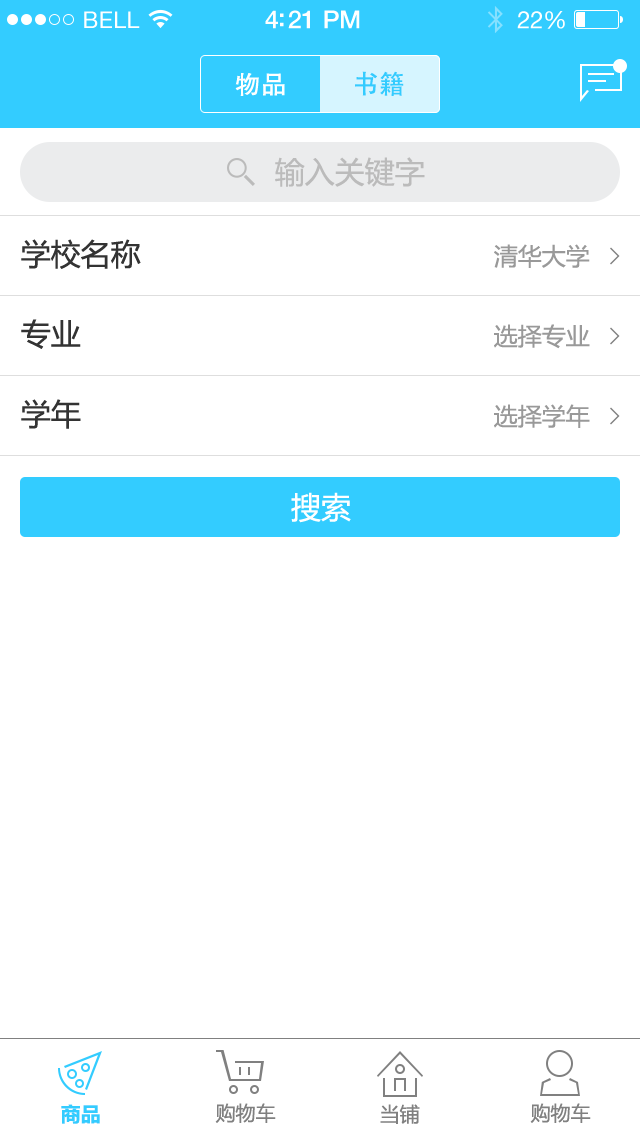
<style>
.page{position:relative;width:640px;height:1136px;background:#ffffff}
.page>*{position:absolute;margin:0}
.t1{font:23px "HelveticaNeue";letter-spacing:0.02em;color:#ffffff}
.t2{font:25px "HelveticaNeue-Medium";letter-spacing:-0.02em;color:#ffffff}
.t3{font:24px "HelveticaNeue";letter-spacing:-0.02em;color:#ffffff}
.t4{font:26px "FZHTJW--GB1-0";color:#ffffff}
.t5{font:26px "AdobeHeitiStd-Regular";color:#33ccff}
.t6{font:30px "MicrosoftYaHei";color:#bbbbbb}
.t7{font:30px "MicrosoftYaHei";color:#333333}
.t8{font:24px "MicrosoftYaHei";color:#999999}
.t9{font:30px "MicrosoftYaHei";color:#ffffff}
.t10{font:20px "MicrosoftYaHei";color:#33ccff}
.t11{font:20px "MicrosoftYaHei";color:#808080}
</style>
<div class="page">
<p class="t1" style="left:84px;top:11px;width:56px;height:17px">BELL</p>
<p class="t2" style="left:265px;top:10px;width:95px;height:19px">4:21 PM</p>
<p class="t3" style="left:517px;top:11px;width:48px;height:18px">22%</p>
<p class="t4" style="left:235px;top:73px;width:50px;height:23px">物品</p>
<p class="t5" style="left:355px;top:71px;width:49px;height:25px">书籍</p>
<p class="t6" style="left:275px;top:157px;width:150px;height:30px">输入关键字</p>
<p class="t7" style="left:21px;top:239px;width:120px;height:30px">学校名称</p>
<p class="t8" style="left:494px;top:244px;width:96px;height:24px">清华大学</p>
<p class="t7" style="left:21px;top:319px;width:60px;height:30px">专业</p>
<p class="t8" style="left:494px;top:324px;width:96px;height:25px">选择专业</p>
<p class="t7" style="left:21px;top:399px;width:60px;height:30px">学年</p>
<p class="t8" style="left:494px;top:404px;width:96px;height:24px">选择学年</p>
<p class="t9" style="left:291px;top:492px;width:60px;height:31px">搜索</p>
<p class="t10" style="left:61px;top:1104px;width:39px;height:20px">商品</p>
<p class="t11" style="left:215px;top:1103px;width:61px;height:20px">购物车</p>
<p class="t11" style="left:380px;top:1104px;width:40px;height:20px">当铺</p>
<p class="t11" style="left:530px;top:1103px;width:61px;height:20px">购物车</p>
</div>
